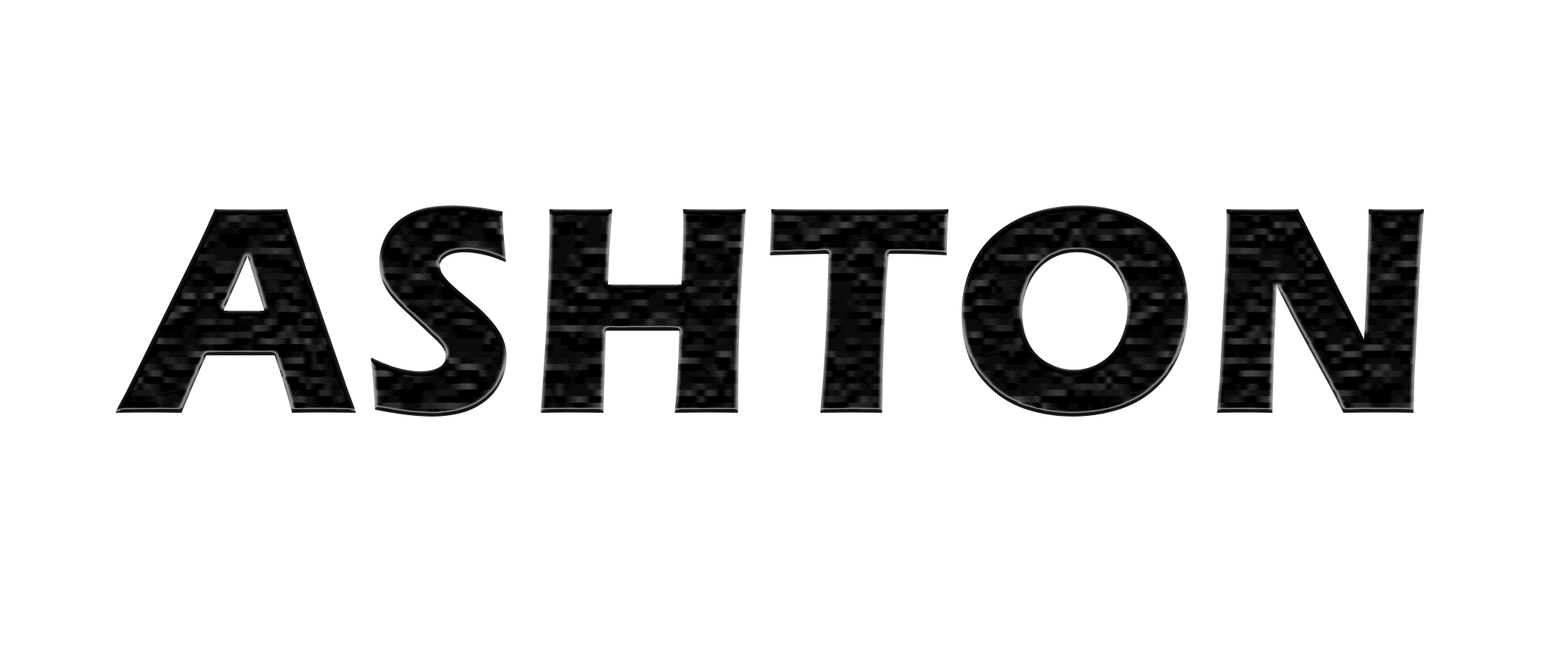
<style>
.page{position:relative;width:1568px;height:672px;background:#ffffff}
.page>*{position:absolute;margin:0}
.t1{font:304.1px "ErasITC-Bold";color:#000000;text-transform:uppercase;font-weight:bold;scale:0.93 1}
</style>
<div class="page">
<p class="t1" style="left:115px;top:205px;width:1310px;height:212px">ashton</p>
</div>
